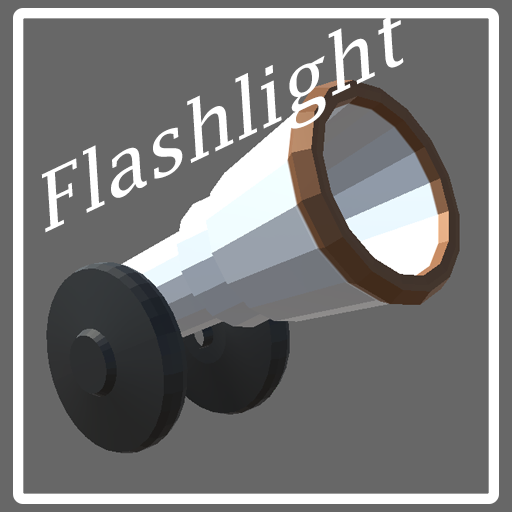
<style>
.page{position:relative;width:512px;height:512px;background:#676767}
.page>*{position:absolute;margin:0}
.t1{font:80px "LucidaFax";color:#ffffff}
</style>
<div class="page">
<p class="t1" style="left:41px;top:15px;width:363px;height:218px;rotate:-25deg">Flashlight</p>
</div>
